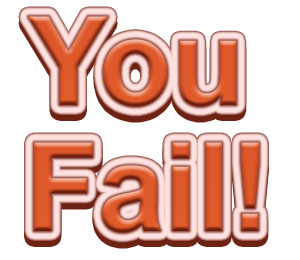
<style>
.page{position:relative;width:300px;height:260px;background:#ffffff}
.page>*{position:absolute;margin:0}
.t1{font:123.2px "Arial-BoldMT";scale:0.97 1}
</style>
<div class="page">
<p class="t1" style="left:28px;top:16px;width:209px;height:91px">You</p>
<p class="t1" style="left:28px;top:22px;width:209px;height:91px">You</p>
<p class="t1" style="left:34px;top:148px;width:225px;height:91px">Fail!</p>
<p class="t1" style="left:34px;top:142px;width:225px;height:91px">Fail!</p>
</div>
